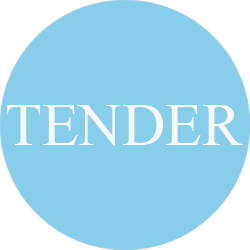
<style>
.page{position:relative;width:250px;height:250px;background:#87ceeb}
.page>*{position:absolute;margin:0}
.t1{font:60px "TimesNewRomanPSMT";color:#f8f8ff}
</style>
<div class="page">
<p class="t1" style="left:6px;top:105px;width:237px;height:41px">TENDER</p>
</div>
